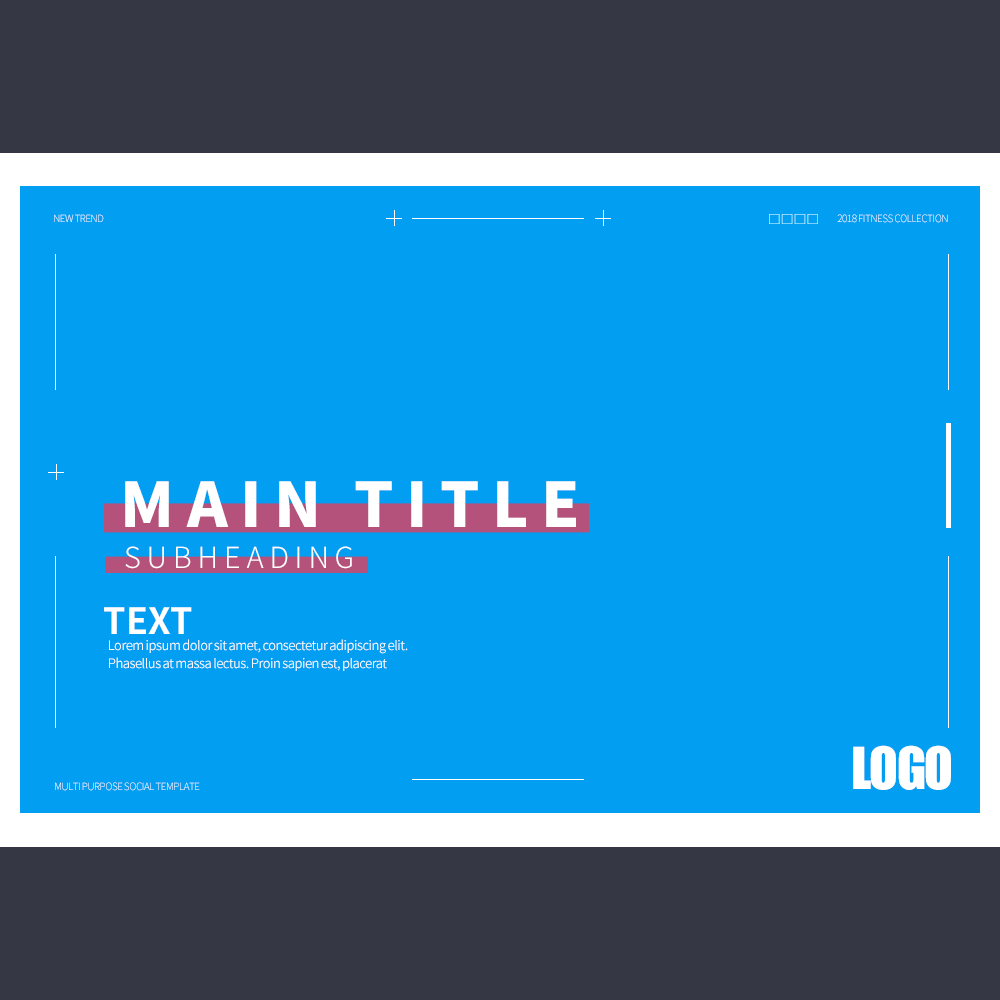
<style>
.page{position:relative;width:1000px;height:1000px;background:#029ef1}
.page>*{position:absolute;margin:0}
.t1{font:10px "SourceHanSansKR-Light";letter-spacing:-0.05em}
.t2{font:61.6px "SourceHanSansKR-Heavy";letter-spacing:0.2em;color:#ffffff}
.t3{font:29px "SourceHanSansKR-Light";letter-spacing:0.2em;color:#ffffff}
.t4{font:36px "SourceHanSansKR-Bold";color:#ffffff}
.t5{font:13px/18px "SourceHanSansKR-Normal";letter-spacing:-0.04em;color:#ffffff}
.t6{font:53.5px "Impact";letter-spacing:-0.025em;color:#ffffff}
.t7{font:10px "SourceHanSansKR-Light";letter-spacing:-0.05em;color:#ffffff}
</style>
<div class="page">
<p class="t1" style="left:54px;top:214px;width:50px;height:8px">NEW TREND</p>
<p class="t1" style="left:837px;top:214px;width:111px;height:9px">2018 FITNESS COLLECTION</p>
<p class="t2" style="left:125px;top:481px;width:451px;height:46px">MAIN TITLE</p>
<p class="t3" style="left:125px;top:546px;width:227px;height:23px">SUBHEADING</p>
<p class="t4" style="left:104px;top:607px;width:88px;height:27px">TEXT</p>
<p class="t5" style="left:109px;top:639px;width:299px;height:32px">Lorem ipsum dolor sit amet, consectetur adipiscing elit. <br>Phasellus at massa lectus. Proin sapien est, placerat</p>
<p class="t6" style="left:853px;top:745px;width:98px;height:45px">LOGO</p>
<p class="t7" style="left:55px;top:782px;width:145px;height:9px">MULTI PURPOSE SOCIAL TEMPLATE</p>
</div>
